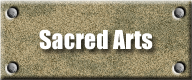
<style>
.page{position:relative;width:192px;height:80px}
.page>*{position:absolute;margin:0}
.t1{font:24px "Impact";color:#ffffff}
</style>
<div class="page">
<p class="t1" style="left:39px;top:29px;width:114px;height:21px">Sacred Arts</p>
</div>
